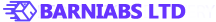
<style>
.page{position:relative;width:216px;height:22px;background:#ffffff}
.page>*{position:absolute;margin:0}
.t1{font:20.4px "MicrosoftNewTaiLue-Bold";letter-spacing:-0.025em;color:#6633ff;font-weight:bold}
</style>
<div class="page">
<p class="t1" style="left:40px;top:3px;width:146px;height:16px">BARNIABS LTD</p>
</div>
